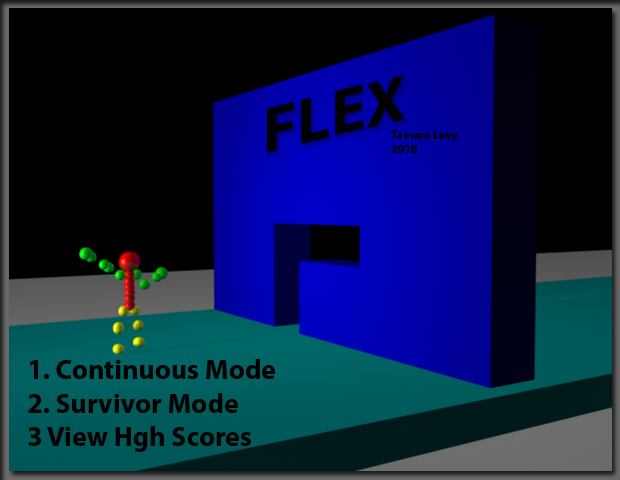
<style>
.page{position:relative;width:620px;height:480px;background:#000000}
.page>*{position:absolute;margin:0}
.t1{font:12px "MyriadPro-Bold";color:#010101}
.t2{font:28px "MyriadPro-Bold";color:#010101}
</style>
<div class="page">
<p class="t1" style="left:390px;top:130px;width:68px;height:23px">Tamara Levy<br>2010</p>
<p class="t2" style="left:28px;top:359px;width:247px;height:93px">1. Continuous Mode<br>2. Survivor Mode<br>3 View Hgh Scores</p>
</div>
